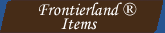
<style>
.page{position:relative;width:165px;height:33px;background:#462c17}
.page>*{position:absolute;margin:0}
.t1{font:18px "MonotypeCorsiva";color:#ffffff}
</style>
<div class="page">
<p class="t1" style="left:39px;top:2px;width:98px;height:14px">Frontierland ®</p>
<p class="t1" style="left:61px;top:18px;width:36px;height:12px">Items</p>
</div>
